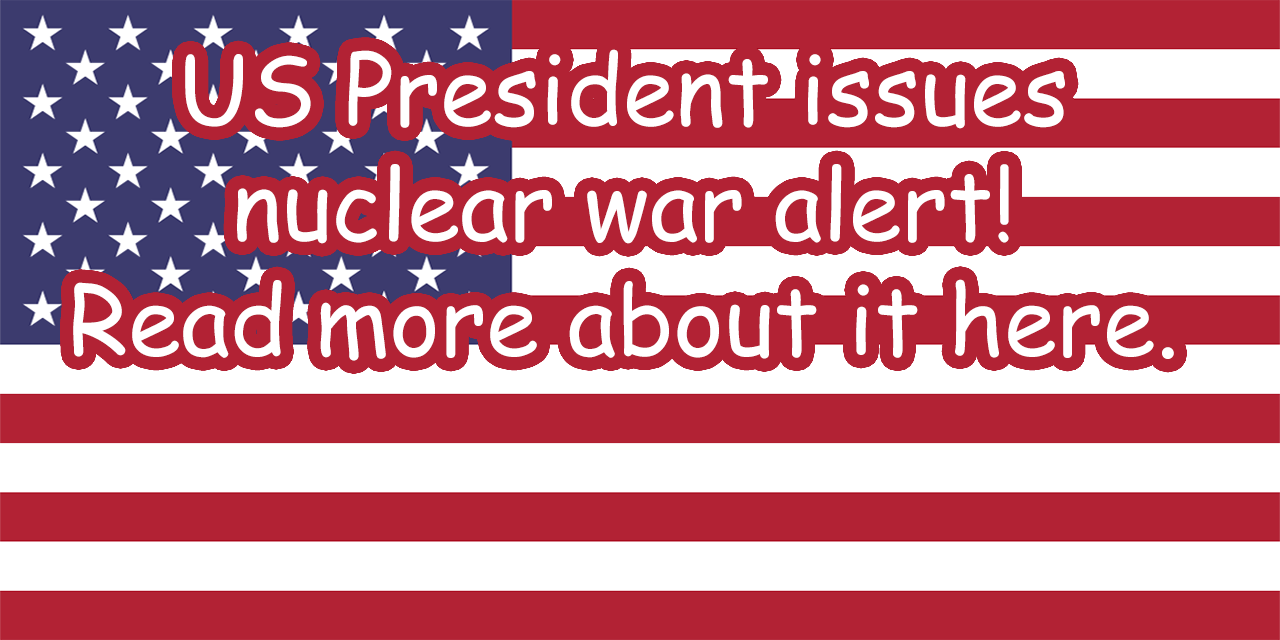
<style>
.page{position:relative;width:1280px;height:640px;background:#b22234}
.page>*{position:absolute;margin:0}
.t1{font:96px "ComicSansMS";color:#ffffff}
</style>
<div class="page">
<p class="t1" style="left:73px;top:49px;width:1101px;height:312px;text-align:center">US President issues<br>nuclear war alert!<br>Read more about it here.</p>
</div>
